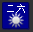
<style>
.page{position:relative;width:33px;height:32px;background:#000090}
.page>*{position:absolute;margin:0}
.t1{font:10.4px "SimSun";color:#ffffff}
</style>
<div class="page">
<p class="t1" style="left:7px;top:4px;width:18px;height:9px">二六</p>
</div>
